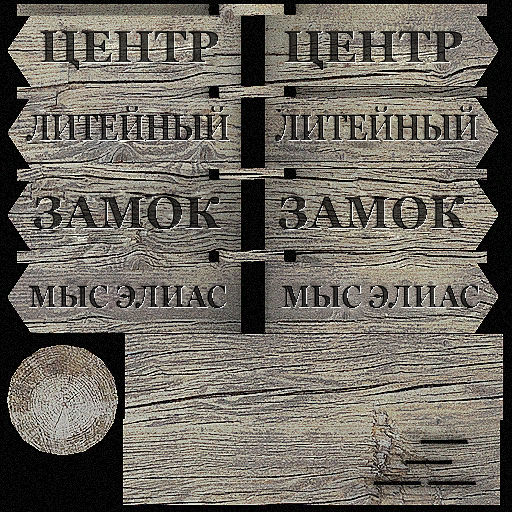
<style>
.page{position:relative;width:512px;height:512px}
.page>*{position:absolute;margin:0}
.t1{font:46px "Georgia-Bold"}
.t2{font:38px "Georgia-Bold";letter-spacing:-0.02em;scale:0.78 1}
.t3{font:32px "Georgia-Bold";letter-spacing:-0.02em;scale:0.9 1}
</style>
<div class="page">
<p class="t1" style="left:40px;top:31px;width:179px;height:40px">ЦЕНТР</p>
<p class="t1" style="left:284px;top:31px;width:179px;height:40px">ЦЕНТР</p>
<p class="t2" style="left:26px;top:106px;width:204px;height:36px">ЛИТЕЙНЫЙ</p>
<p class="t2" style="left:275px;top:106px;width:204px;height:36px">ЛИТЕЙНЫЙ</p>
<p class="t1" style="left:34px;top:196px;width:188px;height:34px">ЗАМОК</p>
<p class="t1" style="left:279px;top:196px;width:188px;height:34px">ЗАМОК</p>
<p class="t3" style="left:29px;top:285px;width:198px;height:24px">МЫС ЭЛИАС</p>
<p class="t3" style="left:282px;top:285px;width:198px;height:24px">МЫС ЭЛИАС</p>
</div>
